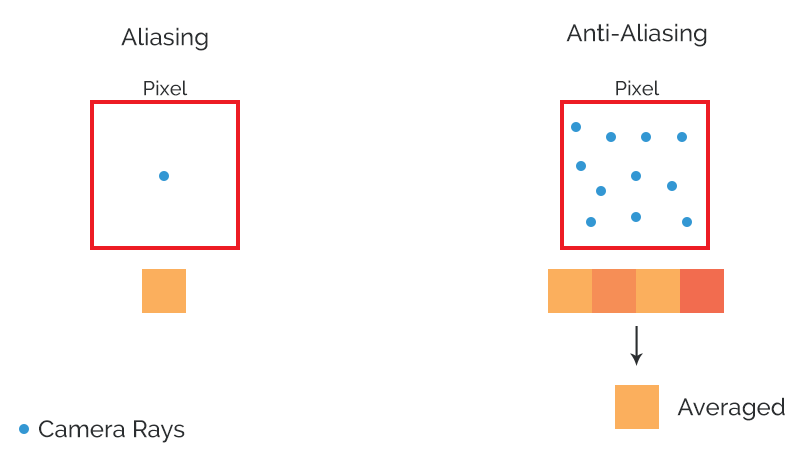
<style>
.page{position:relative;width:800px;height:456px;background:#ffffff}
.page>*{position:absolute;margin:0}
.t1{font:24px "Raleway-Medium";color:#2b2e30}
.t2{font:20px "Raleway-Medium";color:#2b2e30}
</style>
<div class="page">
<p class="t1" style="left:121px;top:27px;width:87px;height:24px">Aliasing</p>
<p class="t1" style="left:566px;top:23px;width:141px;height:24px">Anti-Aliasing</p>
<p class="t2" style="left:144px;top:80px;width:44px;height:16px">Pixel</p>
<p class="t2" style="left:616px;top:80px;width:44px;height:16px">Pixel</p>
<p class="t1" style="left:677px;top:397px;width:108px;height:24px">Averaged</p>
<p class="t1" style="left:39px;top:420px;width:146px;height:23px">Camera Rays</p>
</div>
